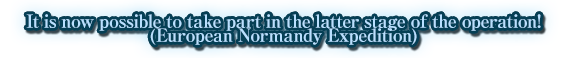
<style>
.page{position:relative;width:570px;height:58px}
.page>*{position:absolute;margin:0}
.t1{font:18px/14px "RyuminPro-ExBold";letter-spacing:-0.04em;color:#b9e0ff}
</style>
<div class="page">
<p class="t1" style="left:26px;top:14px;width:515px;height:31px;text-align:center">It is now possible to take part in the latter stage of the operation!<br>(European Normandy Expedition)</p>
</div>
